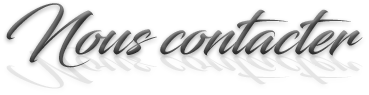
<style>
.page{position:relative;width:369px;height:95px;background:#ffffff}
.page>*{position:absolute;margin:0}
.t1{font:60.3px "Blacksword";color:#595959}
</style>
<div class="page">
<p class="t1" style="left:6px;top:3px;width:357px;height:65px">Nous contacter</p>
</div>
